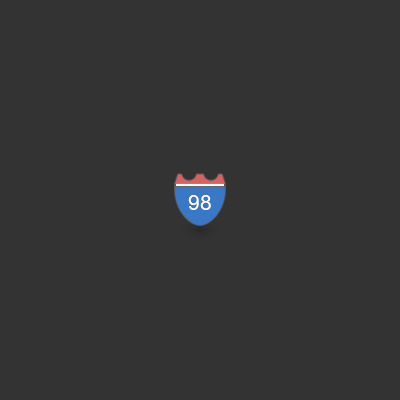
<style>
.page{position:relative;width:400px;height:400px;background:#333333}
.page>*{position:absolute;margin:0}
.t1{font:21px "ArialMT";color:#ffffff}
</style>
<div class="page">
<p class="t1" style="left:188px;top:195px;width:23px;height:15px">98</p>
</div>
